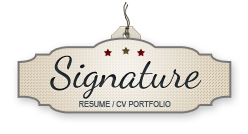
<style>
.page{position:relative;width:248px;height:134px;background:#ffffff}
.page>*{position:absolute;margin:0}
.t1{font:42.9px "DancingScript";color:#20272c}
.t2{font:8.9px "ArialNarrow";color:#414f58;text-transform:uppercase}
</style>
<div class="page">
<p class="t1" style="left:50px;top:55px;width:152px;height:44px">Signature</p>
<p class="t2" style="left:79px;top:101px;width:92px;height:6px">resume / cv portfolio</p>
</div>
